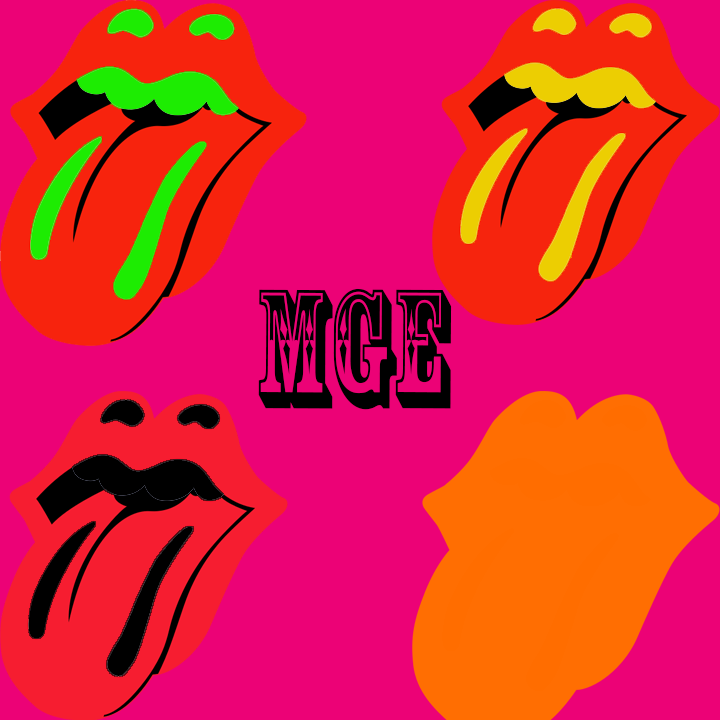
<style>
.page{position:relative;width:720px;height:720px;background:#ec0276}
.page>*{position:absolute;margin:0}
.t1{font:157.8px "RosewoodStd-Regular";color:#000000;scale:0.69 1}
</style>
<div class="page">
<p class="t1" style="left:258px;top:288px;width:194px;height:122px">Mge</p>
</div>
